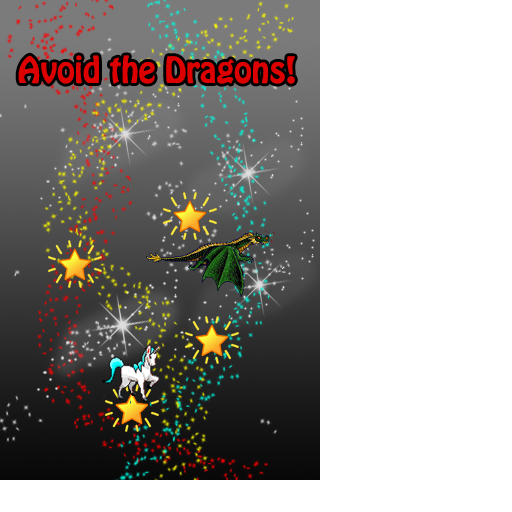
<style>
.page{position:relative;width:512px;height:512px;background:#ffffff}
.page>*{position:absolute;margin:0}
.t1{font:32px "HoboStd";color:#dc0000}
</style>
<div class="page">
<p class="t1" style="left:18px;top:55px;width:277px;height:29px">Avoid the Dragons!</p>
</div>
